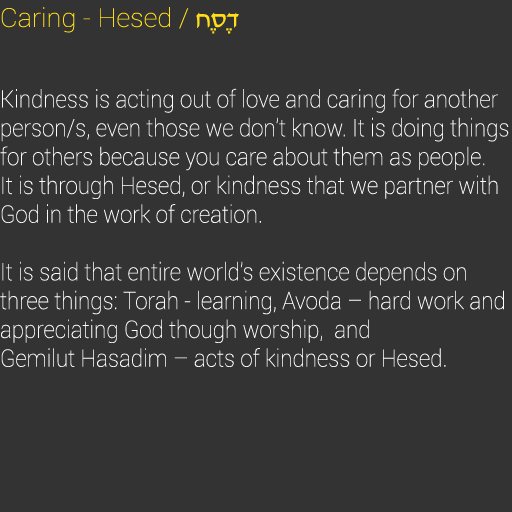
<style>
.page{position:relative;width:512px;height:512px;background:#333333}
.page>*{position:absolute;margin:0}
.t1{font:26px "Roboto-Thin";color:#ffdd17;scale:1.04 1}
.t2{font:26px "David";color:#ffdd17;scale:1.04 1}
.t3{font:24px "Roboto-Thin";color:#ffffff;scale:0.93 1}
</style>
<div class="page">
<p class="t1" style="left:1px;top:7px;width:238px;height:27px">Caring - Hesed / <span class="t2">חֶסֶד</span></p>
<p class="t3" style="left:0px;top:88px;width:509px;height:279px">Kindness is acting out of love and caring for another person/s, even those we don’t know. It is doing things for others because you care about them as people.  <br>It is through Hesed, or kindness that we partner with God in the work of creation.  <br><br>It is said that entire world’s existence depends on three things: Torah - learning, Avoda – hard work and appreciating God though worship,  and <br>Gemilut Hasadim – acts of kindness or Hesed.</p>
</div>
